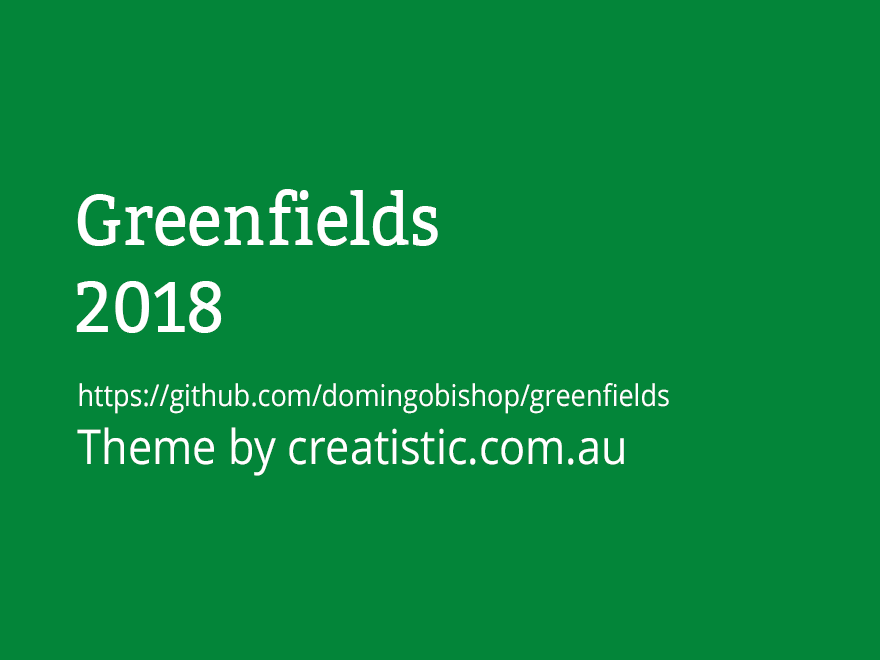
<style>
.page{position:relative;width:880px;height:660px;background:#038539}
.page>*{position:absolute;margin:0}
.t1{font:72px "Bitter-Regular";color:#ffffff;scale:0.9 1}
.t2{font:30px "OpenSans";color:#ffffff;scale:0.9 1}
.t3{font:48px "OpenSans";color:#ffffff;scale:0.9 1}
</style>
<div class="page">
<p class="t1" style="left:76px;top:189px;width:362px;height:144px">Greenfields <br>2018</p>
<p class="t2" style="left:77px;top:383px;width:592px;height:93px">https://github.com/domingobishop/greenfields<br><span class="t3">Theme by creatistic.com.au</span></p>
</div>
